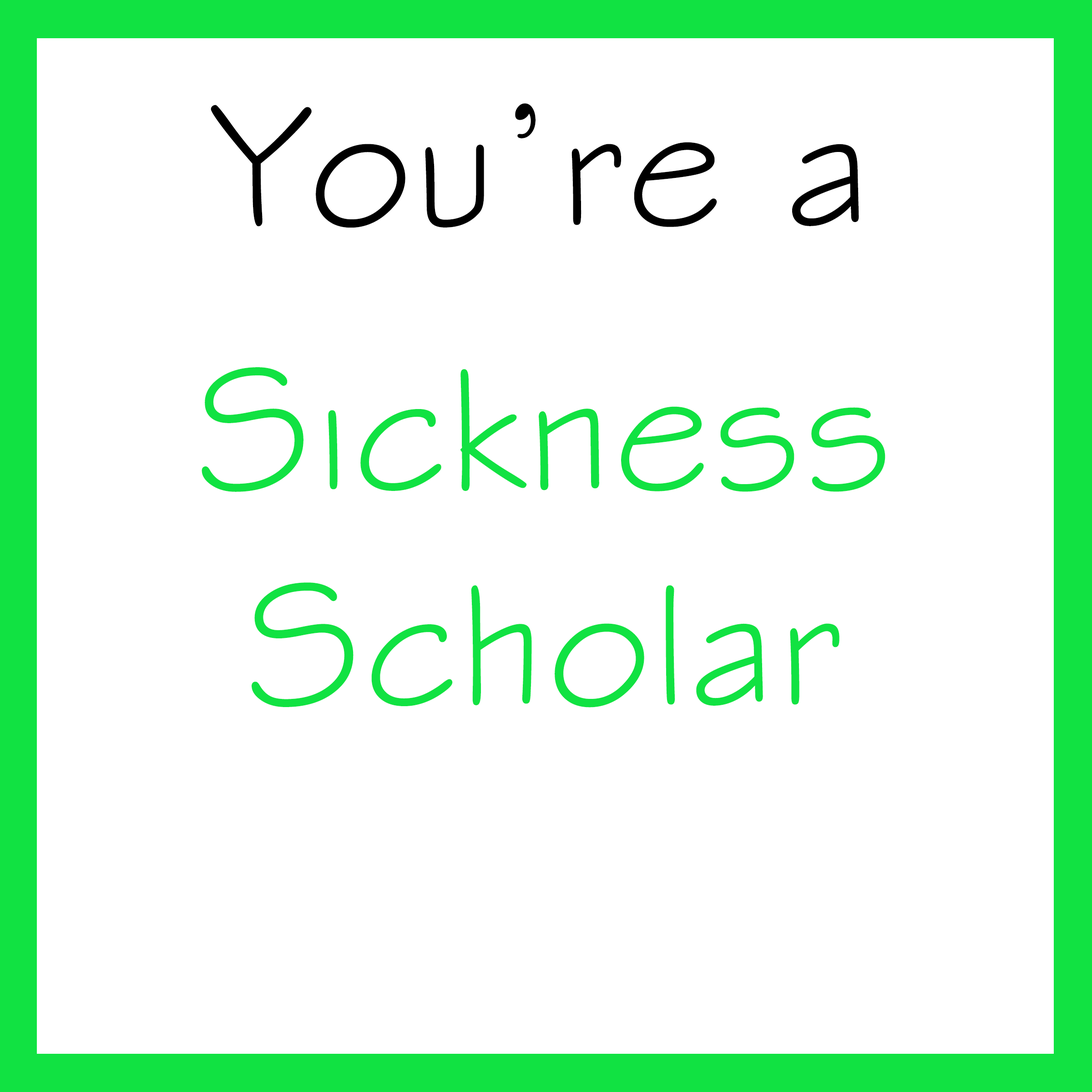
<style>
.page{position:relative;width:1092px;height:1092px;background:#ffffff}
.page>*{position:absolute;margin:0}
.t1{font:179.5px "StylusBT";letter-spacing:0.01em;color:#000000}
.t2{font:179.4px "StylusBT";letter-spacing:0.01em;color:#11e242}
</style>
<div class="page">
<p class="t1" style="left:211px;top:103px;width:648px;height:125px">You’re a</p>
<p class="t2" style="left:202px;top:367px;width:683px;height:341px;text-align:center">Sickness<br>Scholar</p>
</div>
